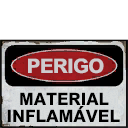
<style>
.page{position:relative;width:128px;height:128px;background:#ffffff}
.page>*{position:absolute;margin:0}
.t1{font:20px "MHeiPRC-Xbold";letter-spacing:-0.04em;color:#cecbce}
.t2{font:16.9px "MHeiPRC-Xbold";color:#000000;text-transform:uppercase}
.t3{font:16.4px "Swiss721BT-Black";color:#000000;font-weight:bold;scale:1.04 1}
</style>
<div class="page">
<p class="t1" style="left:28px;top:58px;width:76px;height:16px">PERIGO</p>
<p class="t2" style="left:20px;top:92px;width:89px;height:13px">MATERIAL</p>
<p class="t2" style="left:7px;top:109px;width:113px;height:13px">INFLAMAVEL</p>
<p class="t3" style="left:78px;top:106px;width:6px;height:4px">´</p>
</div>
